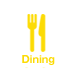
<style>
.page{position:relative;width:72px;height:72px;background:#ffffff}
.page>*{position:absolute;margin:0}
.t1{font:11px "HelveticaNeue-Bold";color:#fcdb05}
</style>
<div class="page">
<p class="t1" style="left:22px;top:55px;width:33px;height:10px">Dining</p>
</div>
